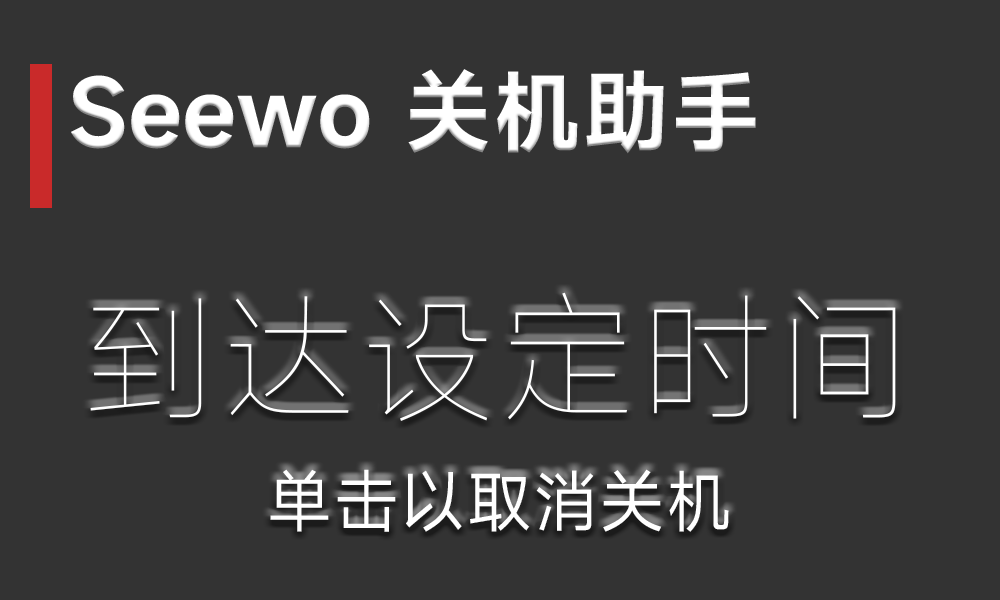
<style>
.page{position:relative;width:1000px;height:600px;background:#333333}
.page>*{position:absolute;margin:0}
.t1{font:88.9px "MiSans-Semibold";color:#ffffff}
.t2{font:138.9px "MiSans-Thin";color:#ffffff}
.t3{font:66.7px "MiSans-Normal";color:#ffffff}
</style>
<div class="page">
<p class="t1" style="left:71px;top:69px;width:685px;height:85px">Seewo 关机助手</p>
<p class="t2" style="left:90px;top:292px;width:806px;height:129px">到达设定时间</p>
<p class="t3" style="left:270px;top:469px;width:459px;height:63px">单击以取消关机</p>
</div>
